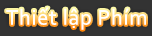
<style>
.page{position:relative;width:152px;height:36px;background:#333333}
.page>*{position:absolute;margin:0}
.t1{font:22px "Corbel";letter-spacing:0.035em;color:#ffffff}
</style>
<div class="page">
<p class="t1" style="left:6px;top:7px;width:140px;height:23px">Thiết lập Phím</p>
</div>
